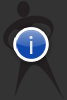
<style>
.page{position:relative;width:67px;height:100px;background:#333333}
.page>*{position:absolute;margin:0}
.t1{font:26.7px "MyriadPro-Regular";color:#ebebeb}
</style>
<div class="page">
<p class="t1" style="left:29px;top:36px;width:4px;height:18px">i</p>
</div>
